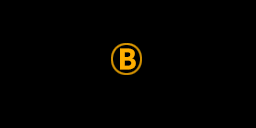
<style>
.page{position:relative;width:256px;height:128px;background:#000000}
.page>*{position:absolute;margin:0}
.t1{font:32px "SourceSansPro-Bold";color:#ffae00}
</style>
<div class="page">
<p class="t1" style="left:120px;top:48px;width:16px;height:22px">B</p>
</div>
